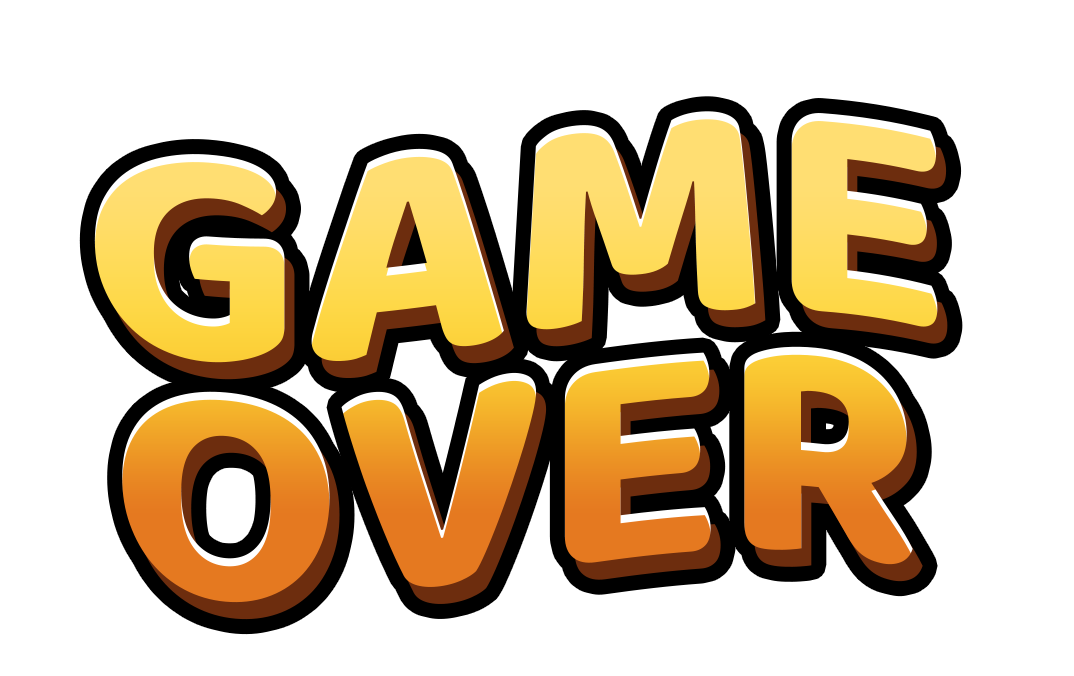
<style>
.page{position:relative;width:1074px;height:676px;background:#ffffff}
.page>*{position:absolute;margin:0}
.t1{font:327.4px "Baloo-Regular"}
</style>
<div class="page">
<p class="t1" style="left:94px;top:111px;width:844px;height:252px">GAME</p>
<p class="t1" style="left:122px;top:346px;width:791px;height:257px">OVER</p>
</div>
